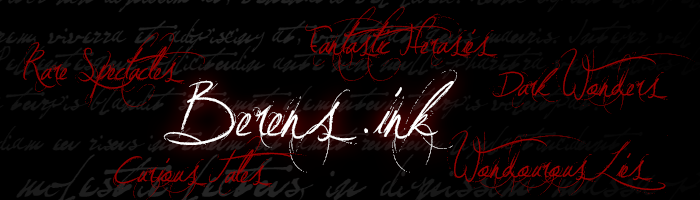
<style>
.page{position:relative;width:700px;height:200px;background:#000000}
.page>*{position:absolute;margin:0}
.t1{font:12px "JellykaVampireStreet";color:#990000}
.t2{font:100px "JellykaVampireStreet";color:#ffffff}
</style>
<div class="page">
<p class="t1" style="left:305px;top:6px;width:193px;height:78px">Fantastic Herasies</p>
<p class="t1" style="left:23px;top:32px;width:184px;height:78px">Rare Spectacles</p>
<p class="t1" style="left:489px;top:48px;width:206px;height:66px">Dark Wonders</p>
<p class="t2" style="left:163px;top:69px;width:294px;height:104px">Berens .ink</p>
<p class="t1" style="left:113px;top:135px;width:194px;height:66px">Curious Tales</p>
<p class="t1" style="left:447px;top:130px;width:221px;height:66px">Wondourous Lies</p>
</div>
